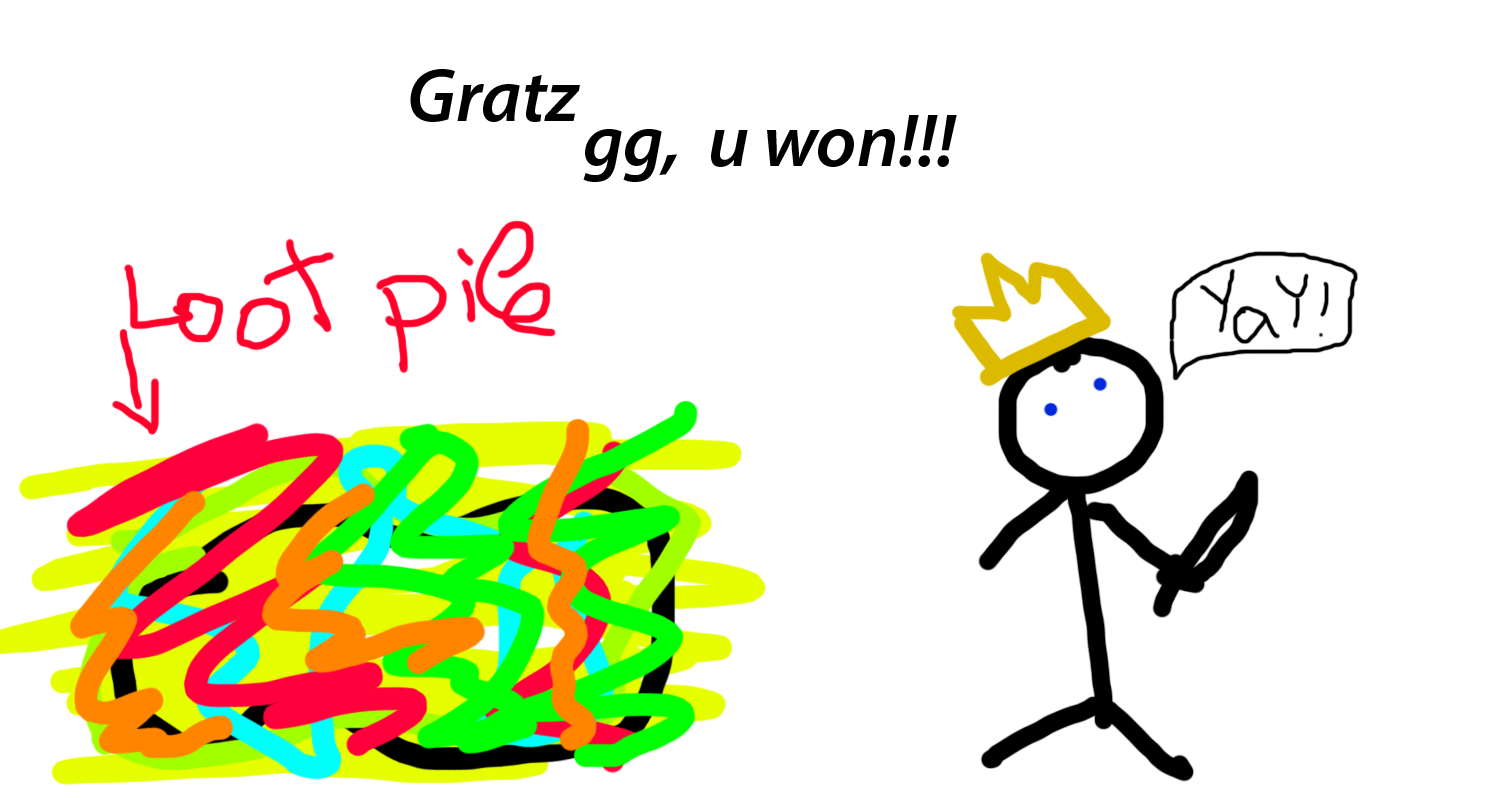
<style>
.page{position:relative;width:1489px;height:800px;background:#ffffff}
.page>*{position:absolute;margin:0}
.t1{font:75px "MyriadPro-SemiboldIt";color:#000000}
</style>
<div class="page">
<p class="t1" style="left:410px;top:69px;width:170px;height:53px">Gratz</p>
<p class="t1" style="left:583px;top:115px;width:374px;height:67px">gg,  u won!!!</p>
</div>
